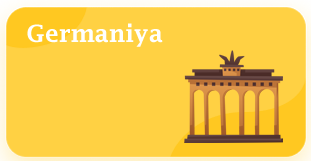
<style>
.page{position:relative;width:311px;height:161px;background:#ffd143}
.page>*{position:absolute;margin:0}
.t1{font:24px "LucidaFax-Demi";color:#ffffff}
</style>
<div class="page">
<p class="t1" style="left:27px;top:23px;width:136px;height:24px">Germaniya</p>
</div>
